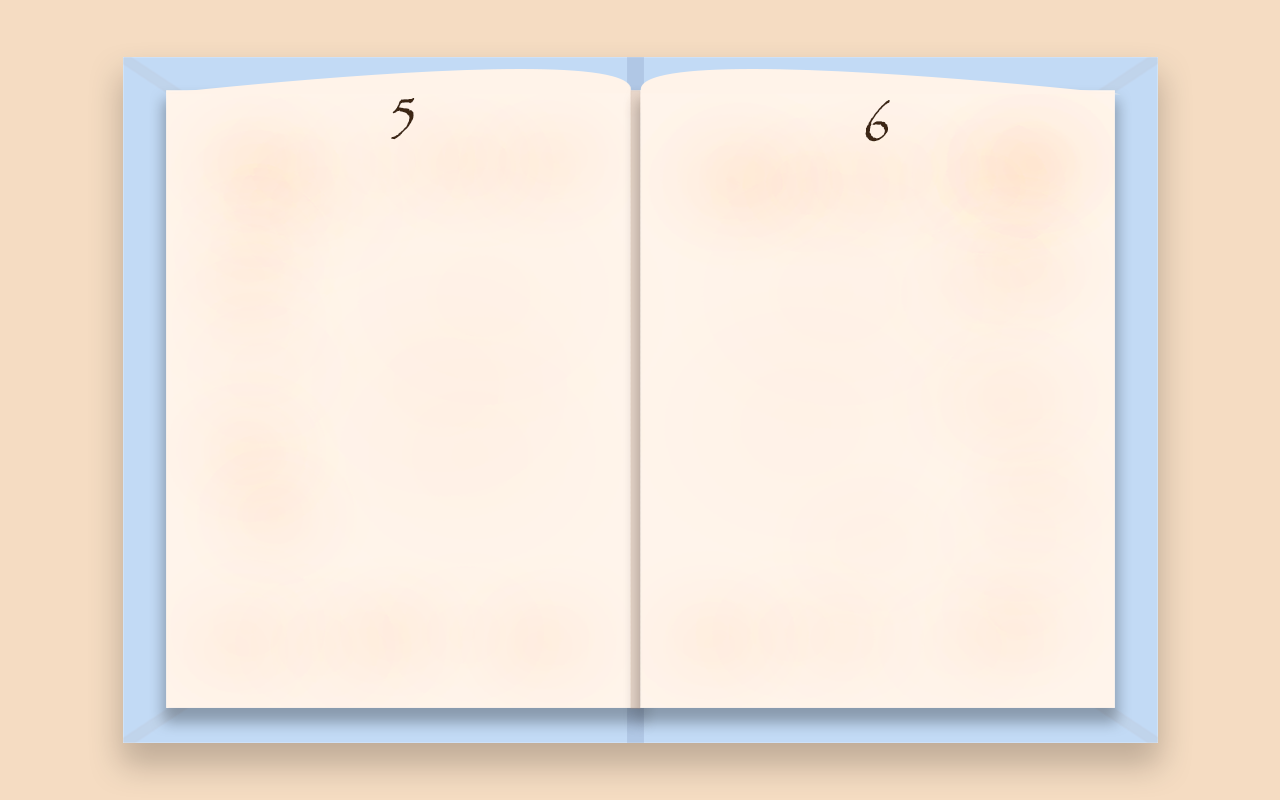
<style>
.page{position:relative;width:1280px;height:800px}
.page>*{position:absolute;margin:0}
.t1{font:50px "Papyrus";color:#3d2614}
</style>
<div class="page">
<p class="t1" style="left:391px;top:98px;width:24px;height:42px">5</p>
<p class="t1" style="left:865px;top:100px;width:25px;height:42px">6</p>
</div>
